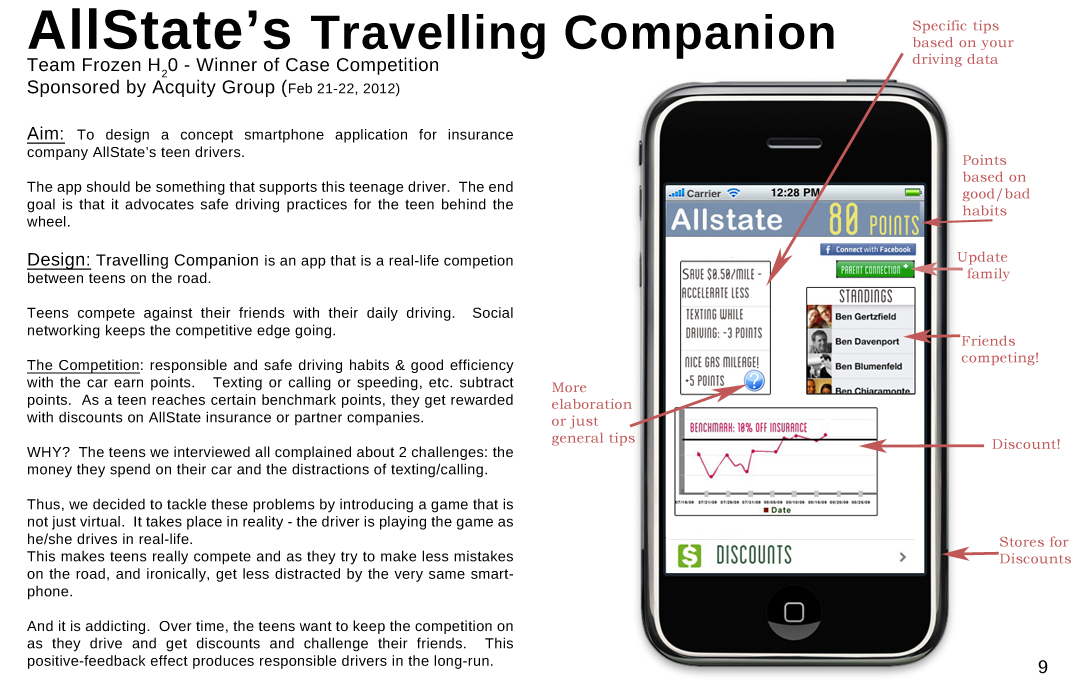
<style>
.page{position:relative;width:1080px;height:700px;background:#ffffff}
.page>*{position:absolute;margin:0}
.t1{font:18.5px "LiberationSans";letter-spacing:0.025em;color:#020202}
.t2{font:55.6px "LiberationSans-Bold";letter-spacing:0.025em;color:#020202}
.t3{font:48px "LiberationSans-Bold";letter-spacing:0.025em;color:#020202}
.t4{font:14px "LiberationSans";letter-spacing:0.025em;color:#020202}
.t5{font:14px "BookmanOldStyle";letter-spacing:0.025em;color:#c15a5a}
.t6{font:14.5px "LiberationSans";letter-spacing:0.025em;color:#020202}
.t7{font:18px "LiberationSans";letter-spacing:0.025em;color:#020202;text-decoration:underline}
.t8{font:16px "LiberationSans";letter-spacing:0.025em;color:#020202}
.t9{font:14.5px "LiberationSans";letter-spacing:0.025em;color:#020202;text-decoration:underline}
.t10{font:18px "LiberationSans";letter-spacing:0.025em;color:#010101}
</style>
<div class="page">
<p class="t1" style="left:27px;top:8px;width:807px;height:89px;text-align:justify"><span class="t2">AllState’s </span><span class="t3">Travelling Companion<br></span>Team Frozen H20 - Winner of Case Competition<br>Sponsored by Acquity Group (<span class="t4">Feb 21-22, 2012)</span></p>
<p class="t5" style="left:912px;top:20px;width:102px;height:47px">Specific tips based on your driving data</p>
<p class="t6" style="left:27px;top:126px;width:487px;height:543px;text-align:justify"><span class="t7">Aim: </span>To design a concept smartphone application for insurance company AllState’s teen drivers. <br><br>The app should be something that supports this teenage driver.  The end goal is that it advocates safe driving practices for the teen behind the wheel.  <br><br><span class="t7">Design: </span><span class="t8">Travelling Companion </span>is an app that is a real-life competion between teens on the road.  <br><br>Teens compete against their friends with their daily driving.  Social networking keeps the competitive edge going.<br><br><span class="t9">The Competition</span>: responsible and safe driving habits &amp; good efficiency with the car earn points.   Texting or calling or speeding, etc. subtract points.  As a teen reaches certain benchmark points, they get rewarded with discounts on AllState insurance or partner companies. <br><br>WHY?  The teens we interviewed all complained about 2 challenges: the money they spend on their car and the distractions of texting/calling.<br><br>Thus, we decided to tackle these problems by introducing a game that is not just virtual.  It takes place in reality - the driver is playing the game as he/she drives in real-life.  <br>This makes teens really compete and as they try to make less mistakes on the road, and ironically, get less distracted by the very same smartphone.  <br><br>And it is addicting.  Over time, the teens want to keep the competition on as they drive and get discounts and challenge their friends.  This positive-feedback effect produces responsible drivers in the long-run.</p>
<p class="t5" style="left:962px;top:154px;width:68px;height:62px">Points<br>based on<br>good/bad<br>habits</p>
<p class="t5" style="left:957px;top:251px;width:53px;height:31px">Update<br>  family</p>
<p class="t5" style="left:961px;top:335px;width:77px;height:31px">Friends<br>competing!</p>
<p class="t5" style="left:552px;top:382px;width:83px;height:64px">More<br>elaboration<br>or just <br>general tips</p>
<p class="t5" style="left:992px;top:438px;width:68px;height:11px">Discount!</p>
<p class="t5" style="left:1000px;top:536px;width:71px;height:28px">Stores for<br>Discounts</p>
<p class="t10" style="left:1038px;top:660px;width:10px;height:14px">9</p>
</div>
